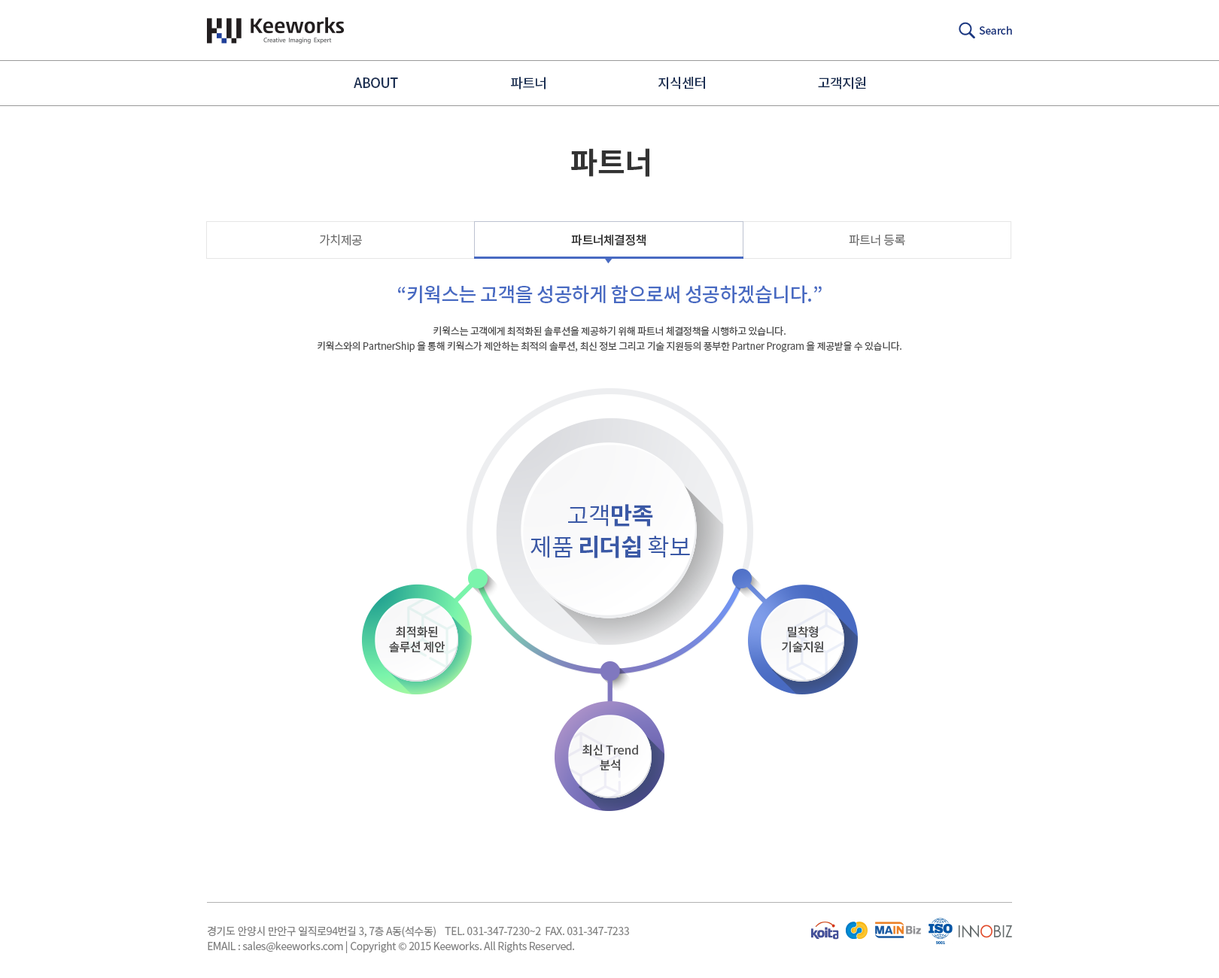
<style>
.page{position:relative;width:1219px;height:978px;background:#ffffff}
.page>*{position:absolute;margin:0}
.t1{font:10.5px "NotoSansCJKkr-Medium";letter-spacing:-0.025em;color:#1b3780}
.t2{font:13.5px "NotoSansCJKkr-Medium";letter-spacing:-0.025em;color:#1c3053;text-transform:uppercase}
.t3{font:30.1px "NotoSansCJKkr-Bold";letter-spacing:-0.025em;color:#333333}
.t4{font:12px "NotoSansCJKkr-DemiLight";letter-spacing:-0.025em;color:#666666}
.t5{font:12px "NotoSansCJKkr-Medium";letter-spacing:-0.025em;color:#333333}
.t6{font:19.6px "NotoSansCJKkr-Medium";letter-spacing:-0.025em;color:#486ac2}
.t7{font:9.8px/15px "NotoSansCJKkr-Regular";letter-spacing:-0.025em;color:#4d4d4d}
.t8{font:24.1px/31.6px "NotoSansCJKkr-Bold";letter-spacing:-0.025em;color:#3b59a6}
.t9{font:24.1px/31.6px "NotoSansCJKkr-Regular";letter-spacing:-0.025em;color:#3b59a6}
.t10{font:12px/15px "NotoSansCJKkr-Medium";letter-spacing:-0.025em;color:#4d4d4d}
.t11{font:10.5px/15px "NotoSansCJKkr-Regular";letter-spacing:-0.025em;color:#808080}
</style>
<div class="page">
<p class="t1" style="left:979px;top:26px;width:33px;height:9px">Search</p>
<p class="t2" style="left:354px;top:78px;width:44px;height:10px">ABOUT</p>
<p class="t2" style="left:511px;top:77px;width:35px;height:13px">파트너</p>
<p class="t2" style="left:658px;top:77px;width:47px;height:13px">지식센터</p>
<p class="t2" style="left:818px;top:77px;width:48px;height:13px">고객지원</p>
<p class="t3" style="left:571px;top:148px;width:78px;height:29px">파트너</p>
<p class="t4" style="left:320px;top:234px;width:42px;height:12px">가치제공</p>
<p class="t5" style="left:571px;top:234px;width:75px;height:12px">파트너체결정책</p>
<p class="t4" style="left:849px;top:234px;width:56px;height:12px">파트너 등록</p>
<p class="t6" style="left:398px;top:285px;width:424px;height:19px">“키웍스는 고객을 성공하게 함으로써 성공하겠습니다.”</p>
<p class="t7" style="left:318px;top:326px;width:583px;height:26px;text-align:center">키웍스는 고객에게 최적화된 솔루션을 제공하기 위해 파트너 체결정책을 시행하고 있습니다.<br>키웍스와의 PartnerShip 을 통해 키웍스가 제안하는 최적의 솔루션, 최신 정보 그리고 기술 지원등의 풍부한 Partner Program 을 제공받을 수 있습니다.</p>
<p class="t8" style="left:530px;top:504px;width:160px;height:54px;text-align:center"><span class="t9">고객</span>만족<br><span class="t9">제품 </span>리더쉽 <span class="t9">확보</span></p>
<p class="t10" style="left:389px;top:626px;width:56px;height:27px;text-align:center">최적화된<br>솔루션 제안</p>
<p class="t10" style="left:782px;top:626px;width:42px;height:27px;text-align:center">밀착형<br>기술지원</p>
<p class="t10" style="left:582px;top:744px;width:56px;height:27px;text-align:center">최신 Trend<br>분석</p>
<p class="t11" style="left:208px;top:926px;width:421px;height:27px">경기도 안양시 만안구 일직로94번길 3, 7층 A동(석수동)    TEL. 031-347-7230~2  FAX. 031-347-7233<br>EMAIL : sales@keeworks.com | Copyright © 2015 Keeworks. All Rights Reserved.</p>
</div>
